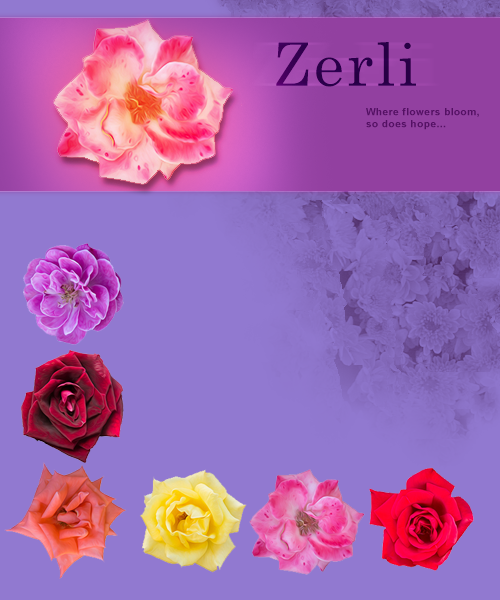
<style>
.page{position:relative;width:500px;height:600px;background:#9179d0}
.page>*{position:absolute;margin:0}
.t1{font:60px "CenturySchoolbook";letter-spacing:0.05em;color:#2a0049}
.t2{font:10px "Arial-BoldMT";letter-spacing:0.05em;color:#541064}
</style>
<div class="page">
<p class="t1" style="left:276px;top:42px;width:140px;height:45px">Zerli</p>
<p class="t2" style="left:366px;top:108px;width:113px;height:22px">Where flowers bloom, so does hope...</p>
</div>
